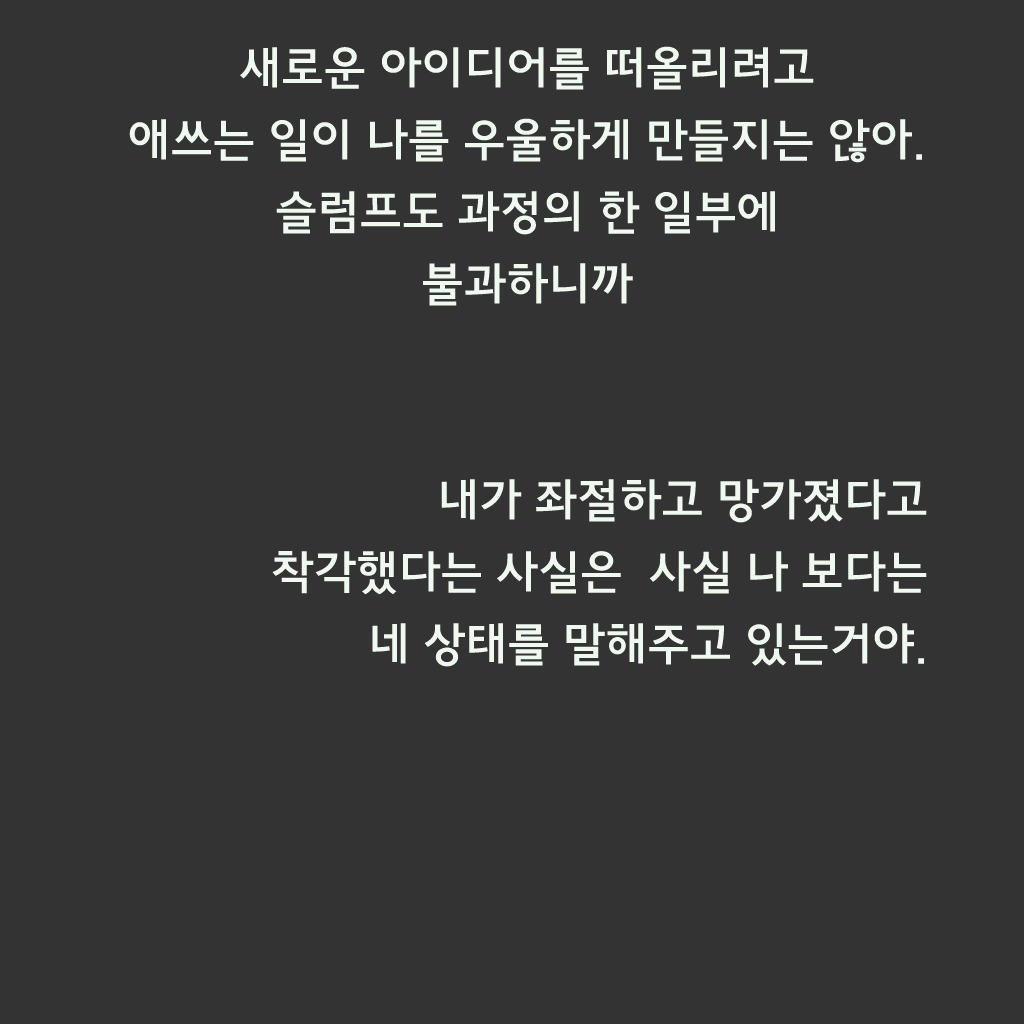
<style>
.page{position:relative;width:1024px;height:1024px;background:#333333}
.page>*{position:absolute;margin:0}
.t1{font:46px/72px "JejuGothic";color:#f0f9f0}
</style>
<div class="page">
<p class="t1" style="left:129px;top:46px;width:793px;height:260px;text-align:center">새로운 아이디어를 떠올리려고<br>애쓰는 일이 나를 우울하게 만들지는 않아. <br>슬럼프도 과정의 한 일부에<br>불과하니까</p>
<p class="t1" style="left:272px;top:479px;width:655px;height:188px;text-align:right">내가 좌절하고 망가졌다고<br>착각했다는 사실은  사실 나 보다는<br>네 상태를 말해주고 있는거야.</p>
</div>
